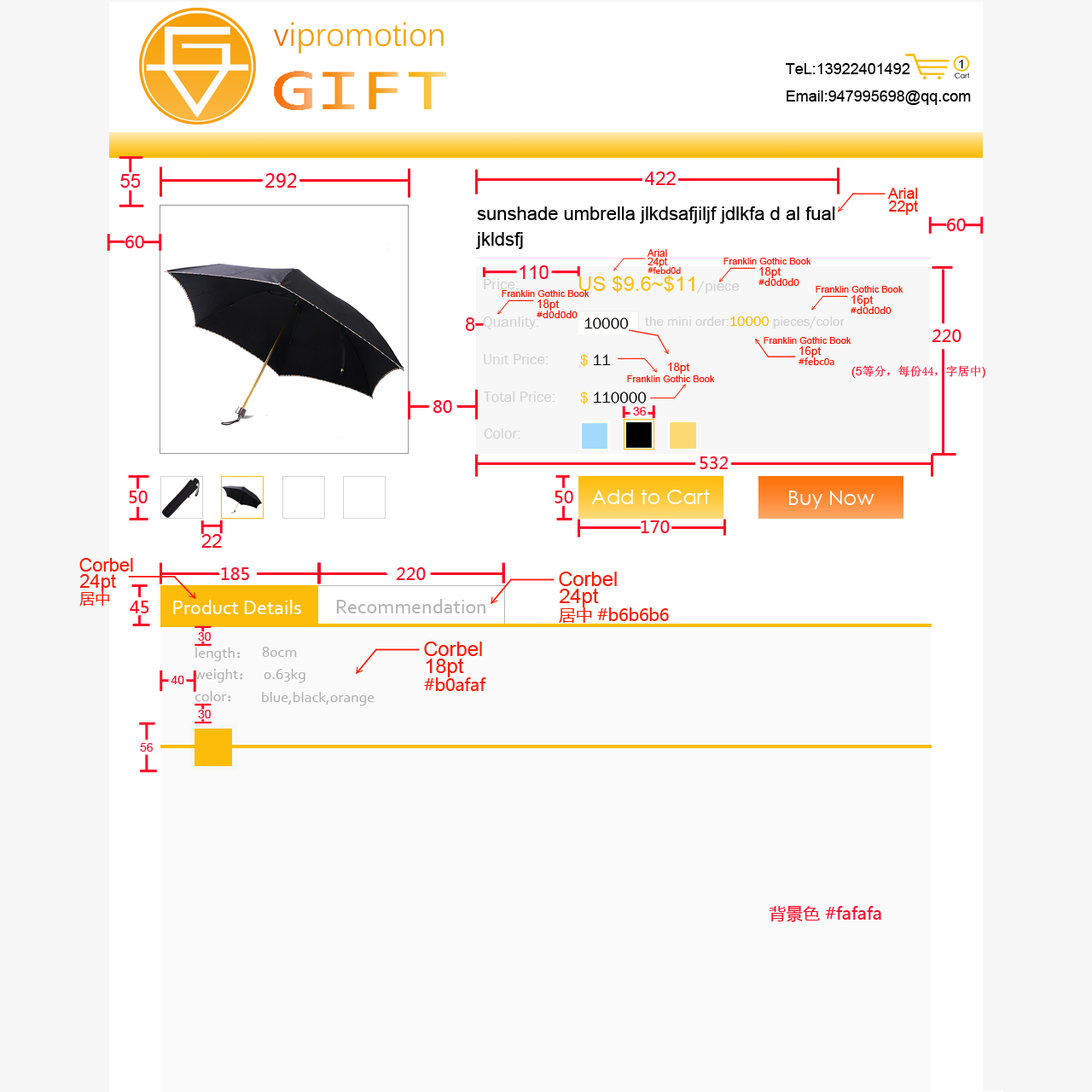
<style>
.page{position:relative;width:1092px;height:1092px;background:#ffffff}
.page>*{position:absolute;margin:0}
.t1{font:15.4px "ArialMT";color:#010101}
.t2{font:11.9px "ArialMT";color:#020202}
.t3{font:18.8px "MicrosoftYaHei";color:#fe0a27}
.t4{font:18.8px "ArialMT";color:#fe0a27}
.t5{font:15px "ArialMT";color:#fc1a02}
.t6{font:18.8px/25.6px "ArialMT";color:#000000}
.t7{font:17.1px "MicrosoftYaHei";color:#fe0a27}
.t8{font:10px "ArialMT";color:#fc1a02}
.t9{font:9.4px "ArialMT";color:#fc1a02}
.t10{font:8.2px "MicrosoftYaHei";color:#fc1a02}
.t11{font:11.5px "ArialMT";color:#fc1a02}
.t12{font:15.4px "FranklinGothic-Book";color:#d0d0d0}
.t13{font:20.5px "ArialMT";color:#febd0d}
.t14{font:9.4px "MicrosoftYaHei";color:#fc1a02}
.t15{font:15.4px "FranklinGothic-Book";color:#060606}
.t16{font:13.6px "FranklinGothic-Book";color:#d0d0d0}
.t17{font:13.6px "FranklinGothic-Book";color:#febc0a}
.t18{font:15.4px "FranklinGothic-Book";color:#febc0a}
.t19{font:11.9px "SimSun";color:#fe0a27}
.t20{font:11.9px "ArialMT";color:#fe0a27}
.t21{font:18.7px "ArialMT";color:#fc1a02}
.t22{font:20.3px "ArialMT";color:#fc1a02}
.t23{font:15.4px "MicrosoftYaHei";color:#fc1a02}
.t24{font:20.5px "Corbel";color:#fefefd}
.t25{font:20.5px "Corbel";color:#b6b6b6}
.t26{font:16.7px "MicrosoftYaHei";color:#fc1a02}
.t27{font:15.4px "Corbel";color:#b0afaf}
.t28{font:15.4px "SimSun";color:#b0afaf}
</style>
<div class="page">
<p class="t1" style="left:786px;top:63px;width:185px;height:42px">TeL:13922401492<br>Email:947995698@qq.com</p>
<p class="t2" style="left:959px;top:60px;width:4px;height:8px">1</p>
<p class="t3" style="left:265px;top:173px;width:32px;height:15px">292</p>
<p class="t4" style="left:645px;top:171px;width:31px;height:14px">422</p>
<p class="t4" style="left:120px;top:174px;width:21px;height:14px">55</p>
<p class="t5" style="left:887px;top:188px;width:31px;height:11px">Arial</p>
<p class="t6" style="left:476px;top:206px;width:359px;height:43px">sunshade umbrella jlkdsafjiljf jdlkfa d al fual <br>jkldsfj</p>
<p class="t5" style="left:889px;top:200px;width:29px;height:15px">22pt</p>
<p class="t7" style="left:947px;top:218px;width:19px;height:13px">60</p>
<p class="t7" style="left:125px;top:235px;width:19px;height:13px">60</p>
<p class="t8" style="left:647px;top:249px;width:20px;height:8px">Arial</p>
<p class="t8" style="left:648px;top:258px;width:19px;height:9px">24pt</p>
<p class="t9" style="left:723px;top:258px;width:88px;height:6px">Franklin Gothic Book</p>
<p class="t4" style="left:520px;top:265px;width:29px;height:14px">110</p>
<p class="t10" style="left:648px;top:267px;width:33px;height:7px">#febd0d</p>
<p class="t11" style="left:759px;top:267px;width:22px;height:11px">18pt</p>
<p class="t12" style="left:484px;top:279px;width:35px;height:10px">Price:</p>
<p class="t13" style="left:578px;top:276px;width:162px;height:17px">US $9.6~$11<span class="t12">/piece</span></p>
<p class="t14" style="left:758px;top:278px;width:41px;height:8px">#d0d0d0</p>
<p class="t9" style="left:502px;top:290px;width:88px;height:7px">Franklin Gothic Book</p>
<p class="t9" style="left:816px;top:286px;width:87px;height:7px">Franklin Gothic Book</p>
<p class="t11" style="left:537px;top:299px;width:23px;height:12px">18pt</p>
<p class="t11" style="left:851px;top:295px;width:23px;height:11px">16pt</p>
<p class="t4" style="left:465px;top:317px;width:10px;height:14px">8</p>
<p class="t12" style="left:483px;top:317px;width:56px;height:12px">Quanlity:</p>
<p class="t14" style="left:537px;top:311px;width:41px;height:7px">#d0d0d0</p>
<p class="t15" style="left:584px;top:317px;width:45px;height:12px">10000</p>
<p class="t16" style="left:644px;top:317px;width:201px;height:11px">the mini order:<span class="t17">10000</span> pieces/color</p>
<p class="t14" style="left:851px;top:306px;width:41px;height:8px">#d0d0d0</p>
<p class="t7" style="left:932px;top:329px;width:29px;height:13px">220</p>
<p class="t9" style="left:764px;top:337px;width:87px;height:7px">Franklin Gothic Book</p>
<p class="t11" style="left:799px;top:346px;width:23px;height:11px">16pt</p>
<p class="t12" style="left:484px;top:354px;width:65px;height:10px">Unit Price:</p>
<p class="t15" style="left:580px;top:354px;width:31px;height:13px"><span class="t18">$</span> 11</p>
<p class="t11" style="left:668px;top:363px;width:22px;height:11px">18pt</p>
<p class="t14" style="left:799px;top:357px;width:35px;height:8px">#febc0a</p>
<p class="t19" style="left:851px;top:365px;width:134px;height:13px"><span class="t20">(5</span>等分，每份44，字居中<span class="t20">)</span></p>
<p class="t9" style="left:627px;top:375px;width:88px;height:7px">Franklin Gothic Book</p>
<p class="t7" style="left:433px;top:400px;width:19px;height:13px">80</p>
<p class="t12" style="left:484px;top:392px;width:71px;height:11px">Total Price:</p>
<p class="t15" style="left:580px;top:392px;width:67px;height:12px"><span class="t18">$</span> 110000</p>
<p class="t20" style="left:633px;top:407px;width:13px;height:8px">36</p>
<p class="t12" style="left:484px;top:428px;width:36px;height:11px">Color:</p>
<p class="t7" style="left:700px;top:456px;width:28px;height:13px">532</p>
<p class="t7" style="left:129px;top:491px;width:19px;height:12px">50</p>
<p class="t7" style="left:555px;top:491px;width:18px;height:12px">50</p>
<p class="t7" style="left:641px;top:520px;width:29px;height:13px">170</p>
<p class="t4" style="left:201px;top:534px;width:21px;height:14px">22</p>
<p class="t21" style="left:79px;top:558px;width:54px;height:14px">Corbel</p>
<p class="t7" style="left:221px;top:567px;width:28px;height:13px">185</p>
<p class="t7" style="left:396px;top:567px;width:30px;height:13px">220</p>
<p class="t21" style="left:79px;top:574px;width:37px;height:17px">24pt</p>
<p class="t22" style="left:559px;top:572px;width:58px;height:14px">Corbel</p>
<p class="t23" style="left:79px;top:591px;width:30px;height:15px">居中</p>
<p class="t22" style="left:559px;top:588px;width:40px;height:19px">24pt</p>
<p class="t7" style="left:130px;top:601px;width:19px;height:12px">45</p>
<p class="t24" style="left:173px;top:600px;width:128px;height:14px">Product Details</p>
<p class="t25" style="left:336px;top:599px;width:150px;height:14px">Recommendation</p>
<p class="t26" style="left:559px;top:607px;width:110px;height:16px">居中 #b6b6b6</p>
<p class="t20" style="left:198px;top:632px;width:13px;height:9px">30</p>
<p class="t22" style="left:424px;top:642px;width:58px;height:14px">Corbel</p>
<p class="t27" style="left:195px;top:648px;width:45px;height:13px">length<span class="t28">：</span></p>
<p class="t27" style="left:262px;top:647px;width:35px;height:10px">80cm</p>
<p class="t22" style="left:426px;top:658px;width:38px;height:19px">18pt</p>
<p class="t20" style="left:171px;top:676px;width:13px;height:8px">40</p>
<p class="t27" style="left:195px;top:669px;width:48px;height:13px">weight<span class="t28">：</span></p>
<p class="t27" style="left:264px;top:669px;width:41px;height:13px">0.63kg</p>
<p class="t26" style="left:424px;top:677px;width:62px;height:14px">#b0afaf</p>
<p class="t27" style="left:195px;top:691px;width:36px;height:11px">color<span class="t28">：</span></p>
<p class="t27" style="left:262px;top:692px;width:113px;height:14px">blue,black,orange</p>
<p class="t20" style="left:198px;top:710px;width:13px;height:8px">30</p>
<p class="t20" style="left:140px;top:743px;width:13px;height:9px">56</p>
<p class="t7" style="left:769px;top:905px;width:112px;height:17px">背景色 #fafafa</p>
</div>
